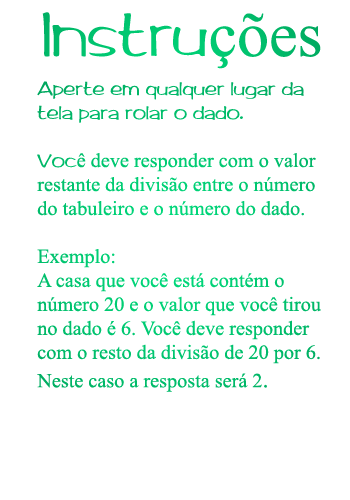
<style>
.page{position:relative;width:350px;height:500px;background:#ffffff}
.page>*{position:absolute;margin:0}
.t1{font:64px "Arctic2";color:#00c26d}
.t2{font:64px "TimesNewRomanPSMT";color:#00c26d}
.t3{font:20px "TimesNewRomanPSMT";color:#00c36e}
.t4{font:20px "Arctic2";color:#00c36e}
.t5{font:23.7px "TimesNewRomanPSMT";color:#00c36e}
</style>
<div class="page">
<p class="t1" style="left:42px;top:12px;width:279px;height:57px">Instru<span class="t2">ções</span></p>
<p class="t3" style="left:37px;top:81px;width:284px;height:311px"><span class="t4">Aperte em qualquer lugar da <br>tela para rolar o dado.<br><br>Voc</span>ê deve responder com o valor<br>restante da divisão entre o número<br>do tabuleiro e o número do dado.<br><br>Exemplo:<br>A casa que você está contém o <br>número 20 e o valor que você tirou<br>no dado é 6. Você deve responder<br>com o resto da divisão de 20 por 6.<br>Neste caso a resposta será 2<span class="t5">.</span></p>
</div>
